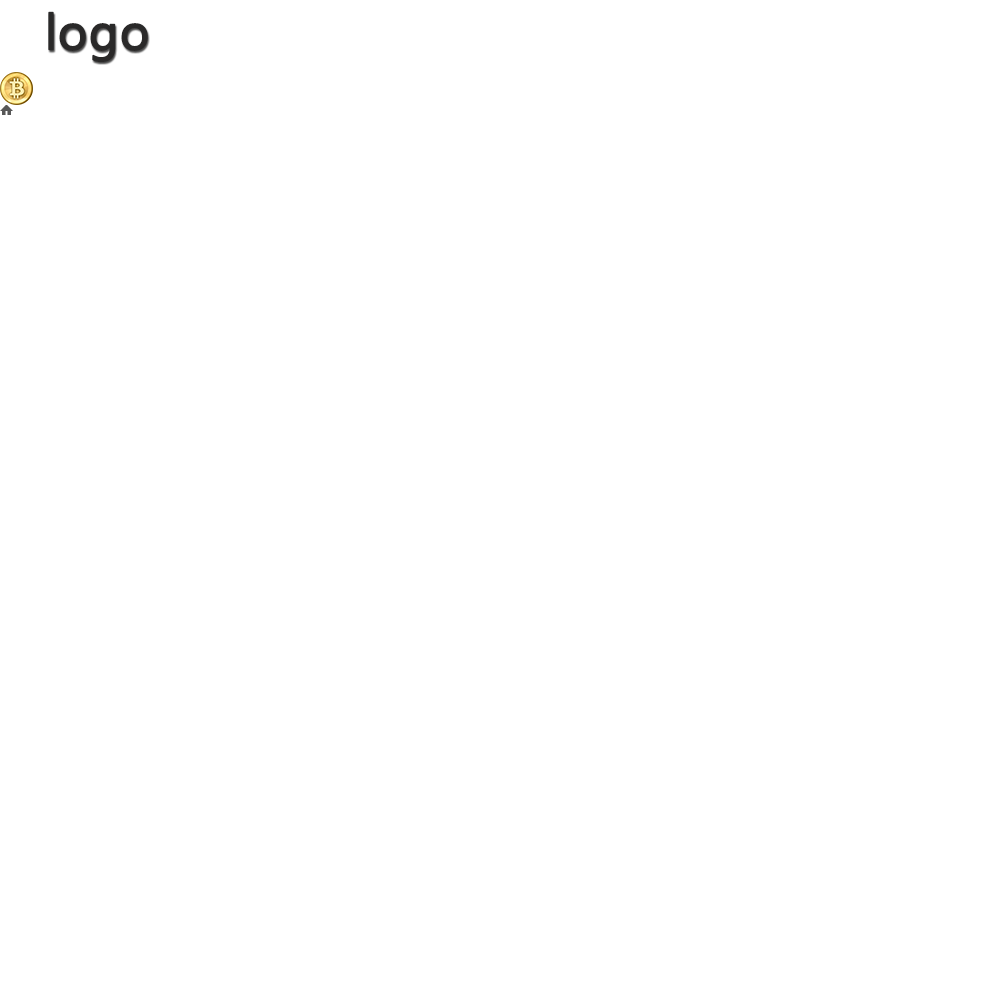
<style>
.page{position:relative;width:1000px;height:1000px;background:#ffffff}
.page>*{position:absolute;margin:0}
.t1{font:50px "SegoeUI";color:#2a2929;font-weight:bold}
</style>
<div class="page">
<p class="t1" style="left:48px;top:11px;width:100px;height:51px">logo</p>
</div>
